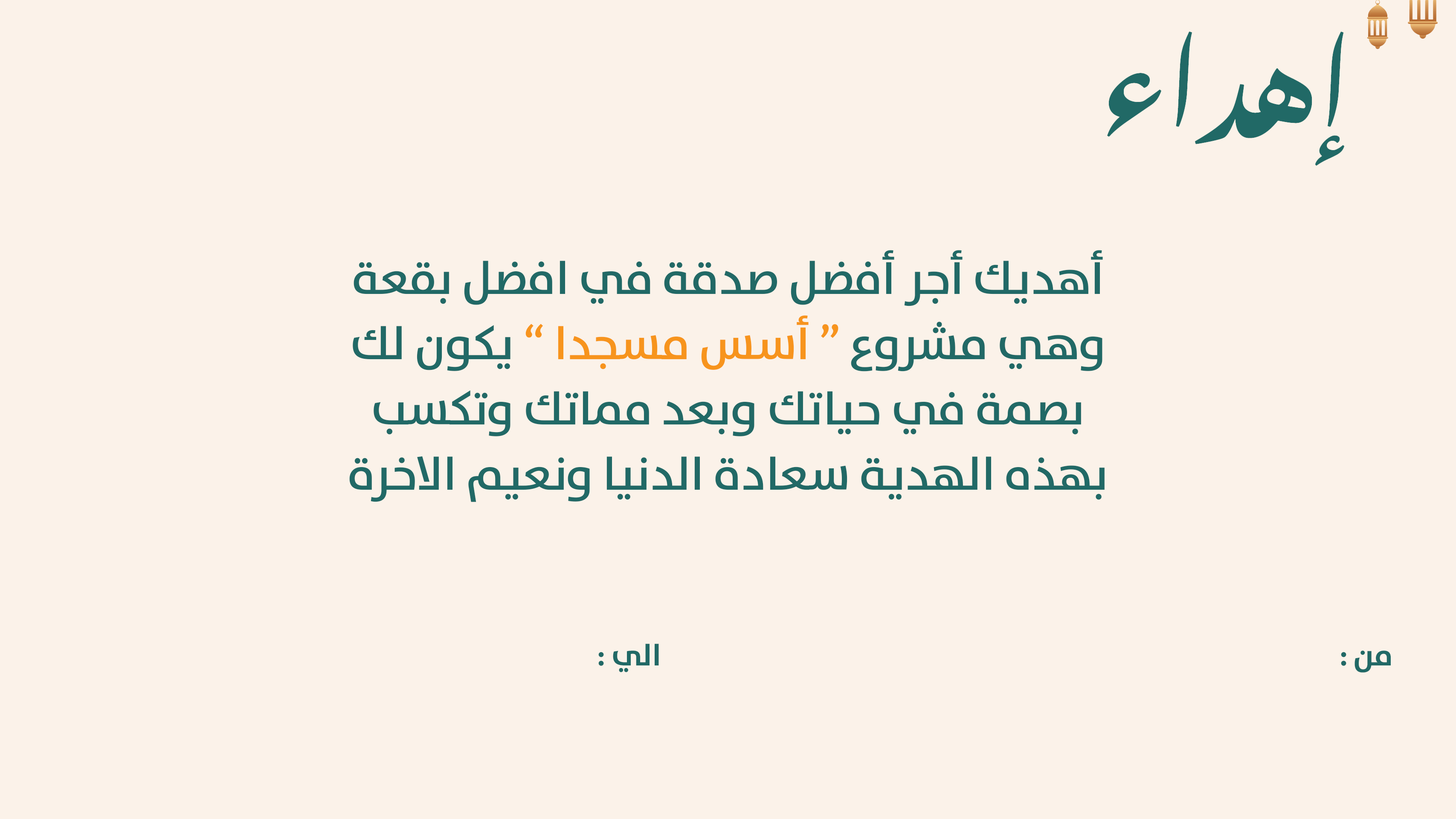
<style>
.page{position:relative;width:1456px;height:819px;background:#fbf2e9}
.page>*{position:absolute;margin:0}
.t1{font:46.9px/65.3px "BahijTheSansArabic-SemiBold";color:#216966}
.t2{font:46.9px/65.3px "BahijTheSansArabic-SemiBold";color:#f7941d}
.t3{font:30.7px "BahijTheSansArabic-Bold";color:#216966}
</style>
<div class="page">
<p class="t1" style="left:349px;top:250px;width:756px;height:252px;text-align:center">أهديك أجر أفضل صدقة في افضل بقعة وهي مشروع <span class="t2">“ أسس مسجدا ”</span> يكون لك بصمة في حياتك وبعد مماتك وتكسب بهذه الهدية سعادة الدنيا ونعيم الاخرة</p>
<p class="t3" style="left:598px;top:644px;width:61px;height:28px">الي :</p>
<p class="t3" style="left:1341px;top:650px;width:50px;height:23px">من :</p>
</div>
